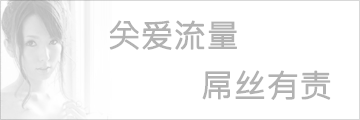
<style>
.page{position:relative;width:360px;height:120px;background:#ffffff}
.page>*{position:absolute;margin:0}
.t1{font:32px "MicrosoftJhengHeiUIRegular";color:#b2b2b2;font-weight:bold}
</style>
<div class="page">
<p class="t1" style="left:109px;top:20px;width:128px;height:30px">关爱流量</p>
<p class="t1" style="left:202px;top:70px;width:129px;height:30px">屌丝有责</p>
</div>
